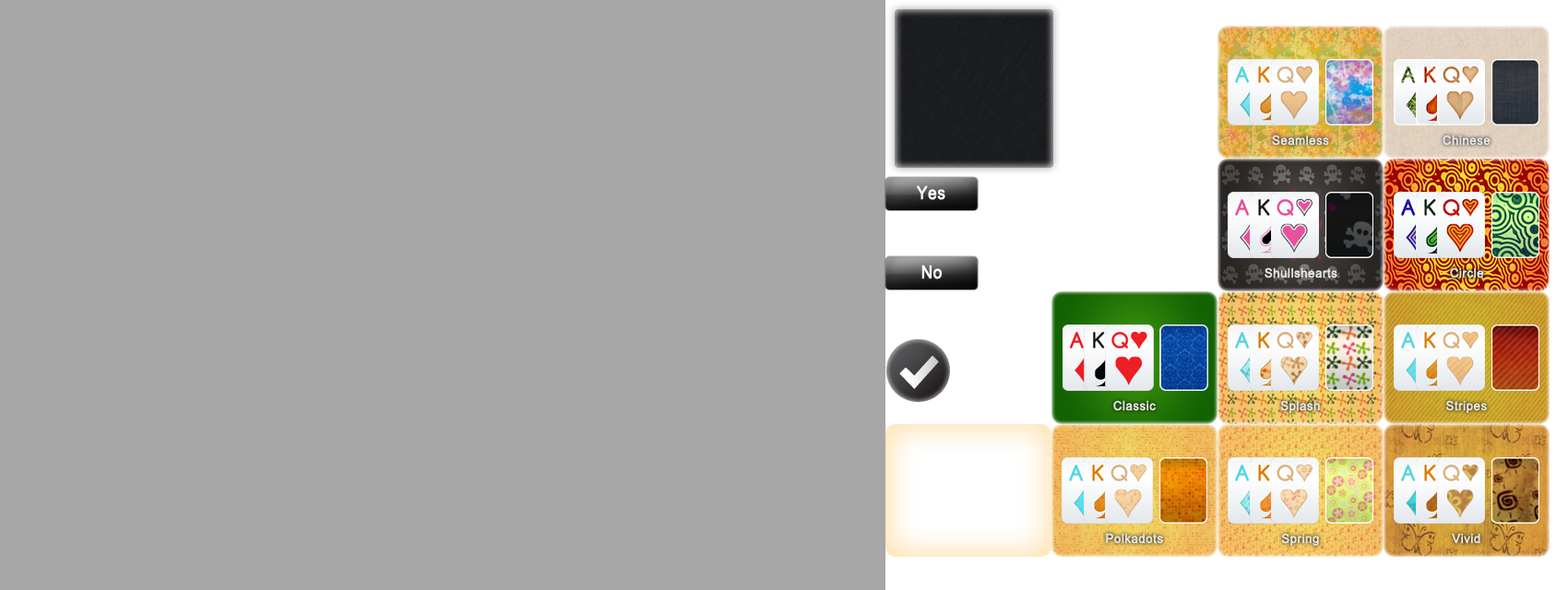
<style>
.page{position:relative;width:1568px;height:590px;background:#a7a7a7}
.page>*{position:absolute;margin:0}
.t1{font:12.6px "ArialMT";letter-spacing:0.025em;color:#e6e6e6;font-weight:bold;scale:0.95 1}
.t2{font:17.6px "ArialMT";letter-spacing:0.025em;color:#ffffff;font-weight:bold;scale:0.88 1}
</style>
<div class="page">
<p class="t1" style="left:1272px;top:135px;width:57px;height:11px">Seamless</p>
<p class="t1" style="left:1443px;top:135px;width:48px;height:11px">Chinese</p>
<p class="t2" style="left:916px;top:185px;width:29px;height:15px">Yes</p>
<p class="t2" style="left:921px;top:265px;width:21px;height:14px">No</p>
<p class="t1" style="left:1265px;top:267px;width:72px;height:12px">Shullshearts</p>
<p class="t1" style="left:1450px;top:267px;width:34px;height:12px">Circle</p>
<p class="t1" style="left:1113px;top:400px;width:43px;height:11px">Classic</p>
<p class="t1" style="left:1280px;top:400px;width:40px;height:13px">Splash</p>
<p class="t1" style="left:1446px;top:400px;width:41px;height:13px">Stripes</p>
<p class="t1" style="left:1106px;top:533px;width:57px;height:11px">Polkadots</p>
<p class="t1" style="left:1281px;top:533px;width:38px;height:13px">Spring</p>
<p class="t1" style="left:1452px;top:533px;width:28px;height:11px">Vivid</p>
</div>
